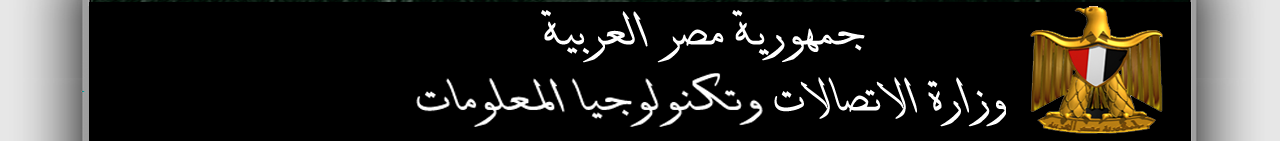
<style>
.page{position:relative;width:1280px;height:141px;background:#000000}
.page>*{position:absolute;margin:0}
.t1{font:48.7px "WinSoftSerifPro-MediumItalic";color:#ffffff;scale:1.07 1}
.t2{font:46.3px "WinSoftSerifPro-MediumItalic";color:#ffffff;scale:1.15 1}
.t3{font:48.7px "WinSoftSerifPro-MediumItalic";color:#ffffff}
</style>
<div class="page">
<p class="t1" style="left:541px;top:10px;width:324px;height:53px">جمهورية مصر العربية</p>
<p class="t2" style="left:416px;top:73px;width:347px;height:54px">وتكنولوجيا المعلومات</p>
<p class="t3" style="left:774px;top:77px;width:233px;height:50px">وزارة الاتصالات</p>
</div>
